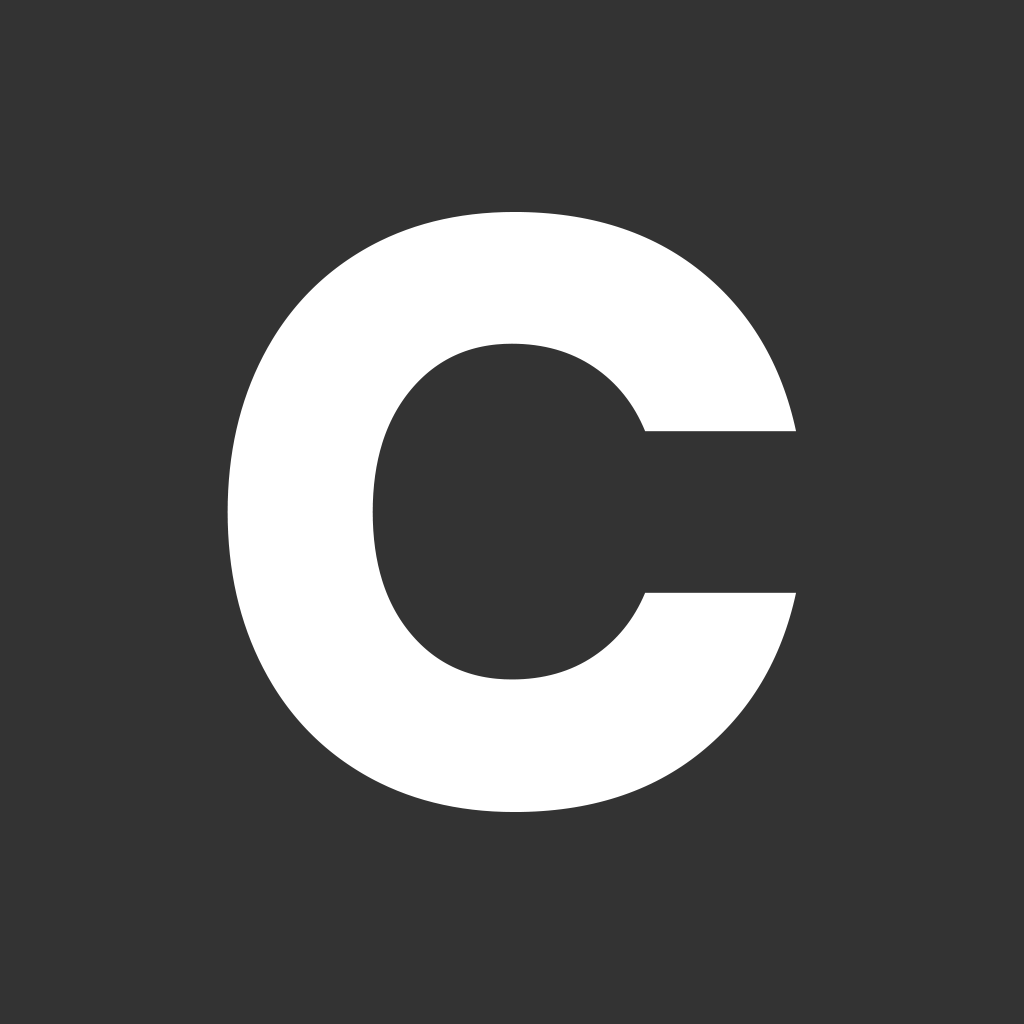
<style>
.page{position:relative;width:1024px;height:1024px;background:#333333}
.page>*{position:absolute;margin:0}
.t1{font:833.3px "Poppins-Bold";letter-spacing:0.025em;color:#ffffff}
</style>
<div class="page">
<p class="t1" style="left:227px;top:212px;width:569px;height:600px">C</p>
</div>
